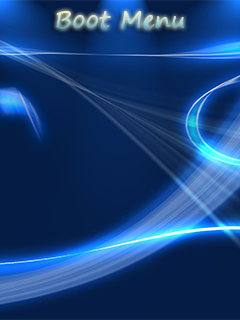
<style>
.page{position:relative;width:240px;height:320px}
.page>*{position:absolute;margin:0}
.t1{font:24px "SegoePrint"}
</style>
<div class="page">
<p class="t1" style="left:56px;top:11px;width:128px;height:18px">Boot Menu</p>
</div>
